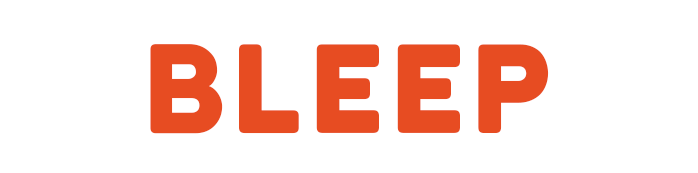
<style>
.page{position:relative;width:698px;height:173px;background:#ffffff}
.page>*{position:absolute;margin:0}
.t1{font:119.8px "KatahdinRound-Regular";color:#e74c22}
</style>
<div class="page">
<p class="t1" style="left:150px;top:44px;width:399px;height:90px">BLEEP</p>
</div>
